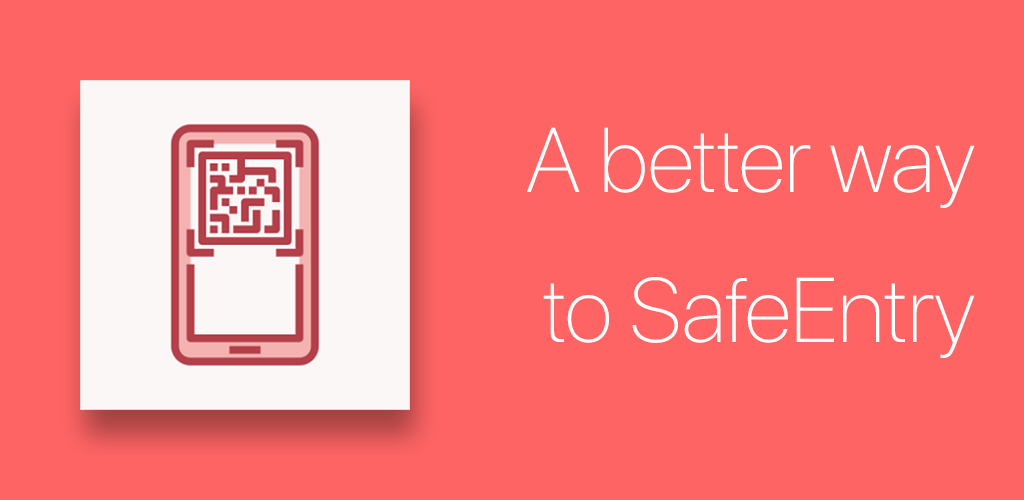
<style>
.page{position:relative;width:1024px;height:500px;background:#ff6464}
.page>*{position:absolute;margin:0}
.t1{font:91.1px/150px "SFProDisplay-Thin";color:#ffffff}
</style>
<div class="page">
<p class="t1" style="left:527px;top:127px;width:448px;height:231px;text-align:right">A better way to SafeEntry</p>
</div>
